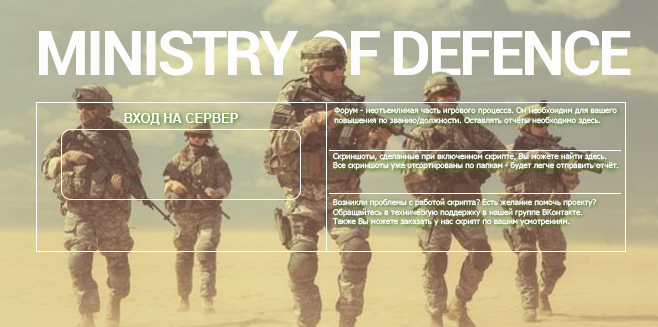
<style>
.page{position:relative;width:658px;height:327px}
.page>*{position:absolute;margin:0}
.t1{font:12.9px "Arial-BoldMT";letter-spacing:-0.005em;color:#fefefe}
.t2{font:8px "Tahoma";letter-spacing:-0.005em;color:#fefefe}
.t3{font:8.1px "Tahoma";letter-spacing:-0.005em;color:#fefefe}
</style>
<div class="page">
<p class="t1" style="left:124px;top:113px;width:114px;height:12px">ВХОД НА СЕРВЕР</p>
<p class="t2" style="left:334px;top:106px;width:283px;height:19px">Форум - неотъемлимая часть игрового процесса. Он необхоидим для вашего <br>повышения по званию/должности. Оставлять отчёты необходимо здесь.</p>
<p class="t2" style="left:333px;top:152px;width:286px;height:18px">Скриншоты, сделанные при включенном скрипте, Вы можете найти здесь.<br>Все скриншоты уже отсортированы по папкам - будет легче отправить отчёт.</p>
<p class="t3" style="left:332px;top:198px;width:265px;height:28px">Возникли проблемы с работой скрипта? Есть желание помочь проекту?<br>Обращайтесь в техническую поддержку в нашей группе ВКонтакте.<br>Также Вы можете заказать у нас скрипт по вашим усмотрениям.</p>
</div>
